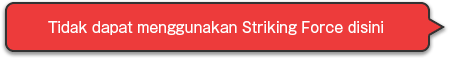
<style>
.page{position:relative;width:450px;height:58px;background:#ed3b3b}
.page>*{position:absolute;margin:0}
.t1{font:14px "GothicMB101Pro-Regular";color:#ffffff}
</style>
<div class="page">
<p class="t1" style="left:48px;top:21px;width:335px;height:14px">Tidak dapat menggunakan Striking Force disini</p>
</div>
